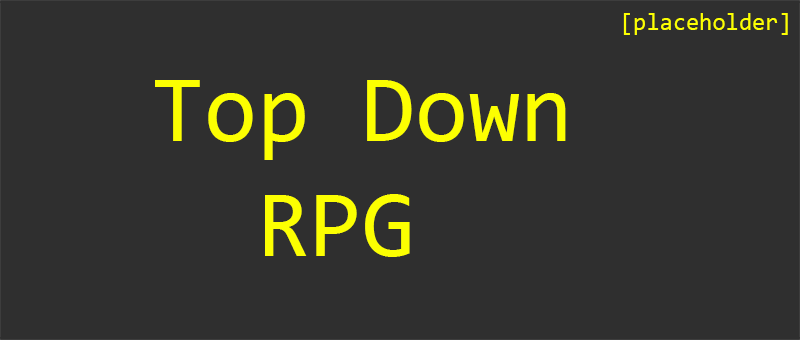
<style>
.page{position:relative;width:800px;height:340px;background:#2f2f2f}
.page>*{position:absolute;margin:0}
.t1{font:24px "Consolas";color:#fcff01}
.t2{font:96px "Consolas";color:#fcff01}
</style>
<div class="page">
<p class="t1" style="left:623px;top:13px;width:165px;height:22px">[placeholder]</p>
<p class="t2" style="left:155px;top:80px;width:411px;height:177px">Top Down<br>  RPG</p>
</div>
